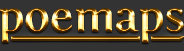
<style>
.page{position:relative;width:184px;height:51px;background:#333333}
.page>*{position:absolute;margin:0}
.t1{font:46px "Fontin-Bold"}
</style>
<div class="page">
<p class="t1" style="left:0px;top:8px;width:184px;height:35px">poemaps</p>
</div>
